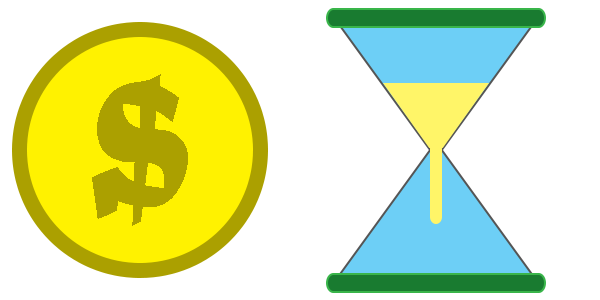
<style>
.page{position:relative;width:600px;height:300px;background:#ffffff}
.page>*{position:absolute;margin:0}
.t1{font:200px "MaturaMTScriptCapitals";color:#aba000}
</style>
<div class="page">
<p class="t1" style="left:92px;top:74px;width:96px;height:152px">$</p>
</div>
